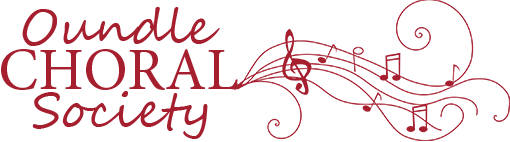
<style>
.page{position:relative;width:510px;height:142px;background:#ffffff}
.page>*{position:absolute;margin:0}
.t1{font:48px "SegoeScript";color:#a51f2f}
.t2{font:60px "MinionPro-Regular";color:#a51f2f}
</style>
<div class="page">
<p class="t1" style="left:22px;top:7px;width:198px;height:39px">Oundle</p>
<p class="t2" style="left:1px;top:49px;width:237px;height:41px">CHORAL</p>
</div>
